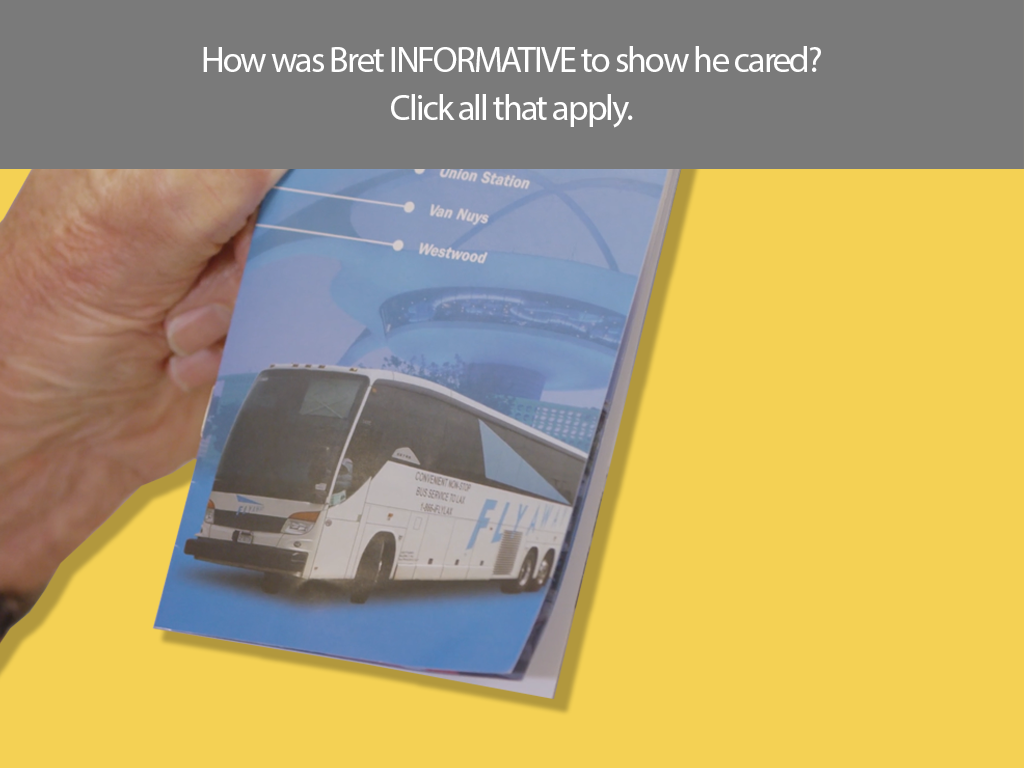
<style>
.page{position:relative;width:1024px;height:768px;background:#f4d154}
.page>*{position:absolute;margin:0}
.t1{font:36px/36px "MyriadPro-Regular";letter-spacing:-0.05em;color:#ffffff}
.t2{font:36px/48px "MyriadPro-Regular";letter-spacing:-0.05em;color:#ffffff}
</style>
<div class="page">
<p class="t1" style="left:203px;top:46px;width:618px;height:82px;text-align:center">How was Bret INFORMATIVE to show he cared?<br><span class="t2">Click all that apply.</span></p>
</div>
